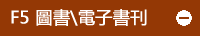
<style>
.page{position:relative;width:200px;height:36px;background:#943805}
.page>*{position:absolute;margin:0}
.t1{font:17px "MicrosoftYaHei";color:#ffffff;font-weight:bold}
</style>
<div class="page">
<p class="t1" style="left:11px;top:9px;width:136px;height:17px">F5 圖書\電子書刊</p>
</div>
